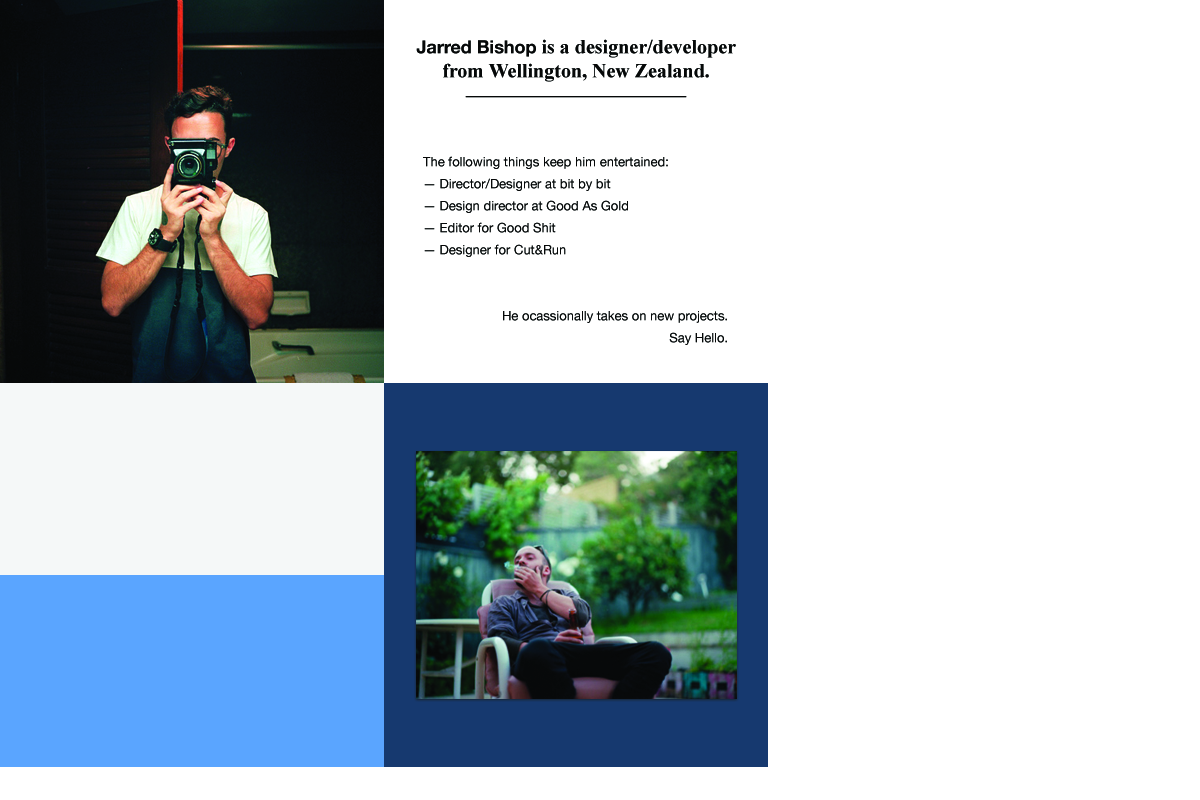
<style>
.page{position:relative;width:1200px;height:800px;background:#ffffff}
.page>*{position:absolute;margin:0}
.t1{font:20px/24px "TimesNewRomanPS-BoldMT";color:#060808}
.t2{font:18px/24px "HelveticaNeue-Bold";color:#060808}
.t3{font:13px/22px "HelveticaNeue";color:#060808}
</style>
<div class="page">
<p class="t1" style="left:416px;top:39px;width:320px;height:59px;text-align:center"><span class="t2">Jarred Bishop</span> is a designer/developer from Wellington, New Zealand.<br>———————————</p>
<p class="t3" style="left:423px;top:156px;width:245px;height:101px">The following things keep him entertained:<br>— Director/Designer at bit by bit<br>— Design director at Good As Gold<br>— Editor for Good Shit<br>— Designer for Cut&amp;Run</p>
<p class="t3" style="left:503px;top:311px;width:224px;height:34px;text-align:right">He ocassionally takes on new projects.<br>Say Hello.</p>
</div>
